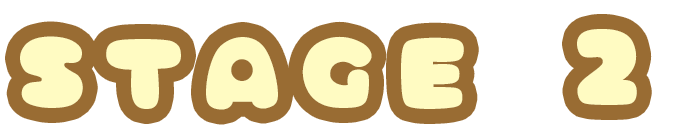
<style>
.page{position:relative;width:673px;height:136px;background:#ffffff}
.page>*{position:absolute;margin:0}
.t1{font:100px "AmeChanPopMaruLight-Regular";letter-spacing:0.2em;color:#fffbc2}
</style>
<div class="page">
<p class="t1" style="left:20px;top:29px;width:617px;height:81px">STAGE 2</p>
</div>
